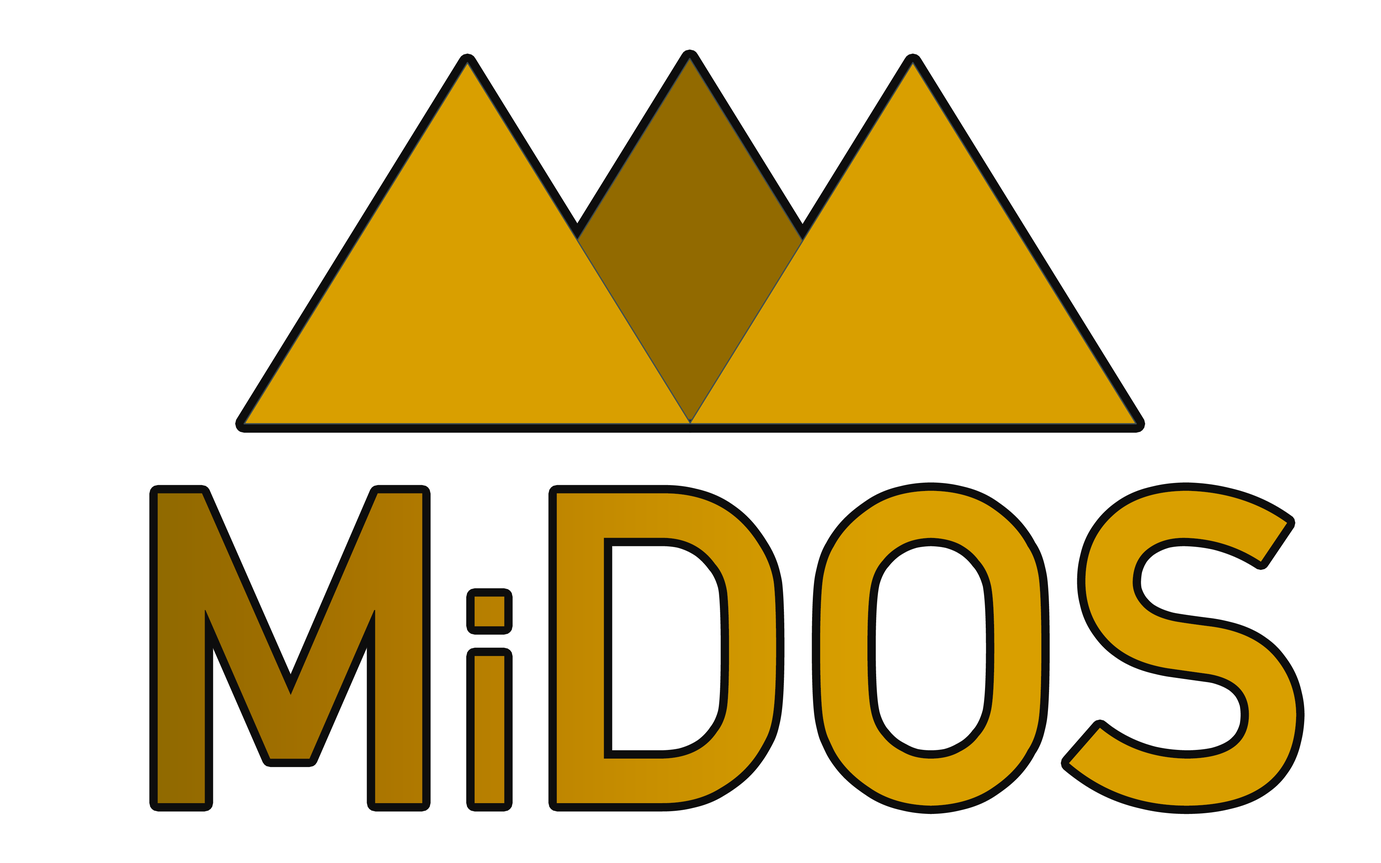
<style>
.page{position:relative;width:1381px;height:863px;background:#ffffff}
.page>*{position:absolute;margin:0}
.t1{font:435.1px "DINAlternate-Bold"}
.t2{font:290px "DINAlternate-Bold"}
</style>
<div class="page">
<p class="t1" style="left:158px;top:491px;width:1139px;height:315px">M<span class="t2">i</span>DOS</p>
</div>
